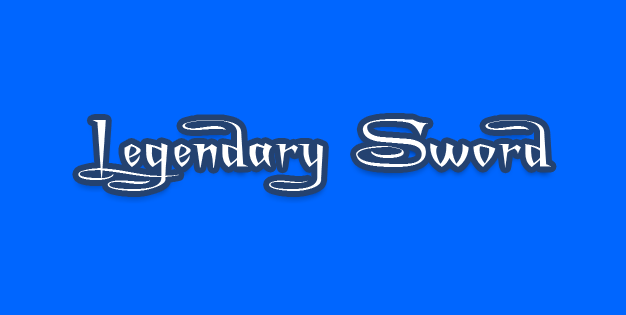
<style>
.page{position:relative;width:626px;height:315px;background:#0066ff}
.page>*{position:absolute;margin:0}
.t1{font:72px "ACharmingFontSuperexpanded";color:#ffffff}
</style>
<div class="page">
<p class="t1" style="left:78px;top:119px;width:473px;height:72px">Legendary Sword</p>
</div>
